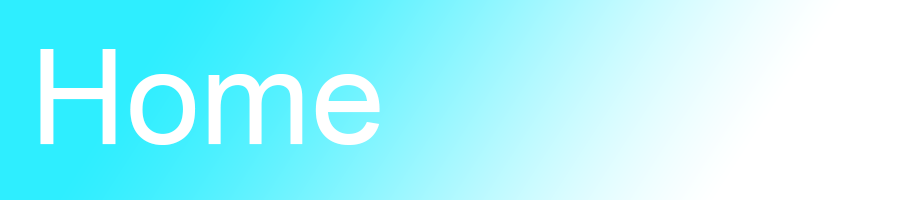
<style>
.page{position:relative;width:900px;height:200px}
.page>*{position:absolute;margin:0}
.t1{font:133.3px "ArialMT";color:#ffffff}
</style>
<div class="page">
<p class="t1" style="left:40px;top:49px;width:340px;height:96px">Home</p>
</div>
